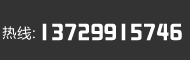
<style>
.page{position:relative;width:190px;height:60px;background:#333333}
.page>*{position:absolute;margin:0}
.t1{font:20.1px "FZHZGBJW--GB1-0";color:#ffffff}
</style>
<div class="page">
<p class="t1" style="left:42px;top:23px;width:140px;height:18px">13729915746</p>
</div>
